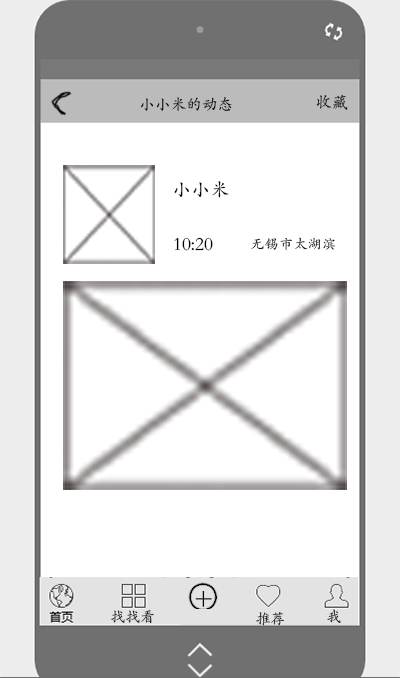
<style>
.page{position:relative;width:400px;height:678px;background:#ffffff}
.page>*{position:absolute;margin:0}
.t1{font:15.8px "STKaiti-SC-Regular";color:#000000}
.t2{font:16.8px "STKaiti-SC-Regular";color:#000000}
.t3{font:18.8px "STKaiti-SC-Regular";color:#000000}
.t4{font:13.9px "STKaiti-SC-Regular";color:#000000;scale:1.03 1}
</style>
<div class="page">
<p class="t1" style="left:141px;top:97px;width:91px;height:14px">小小米的动态</p>
<p class="t2" style="left:316px;top:94px;width:32px;height:16px">收藏</p>
<p class="t3" style="left:174px;top:181px;width:55px;height:17px">小小米</p>
<p class="t3" style="left:174px;top:237px;width:39px;height:14px">10:20</p>
<p class="t4" style="left:251px;top:237px;width:84px;height:14px">无锡市太湖滨</p>
</div>
